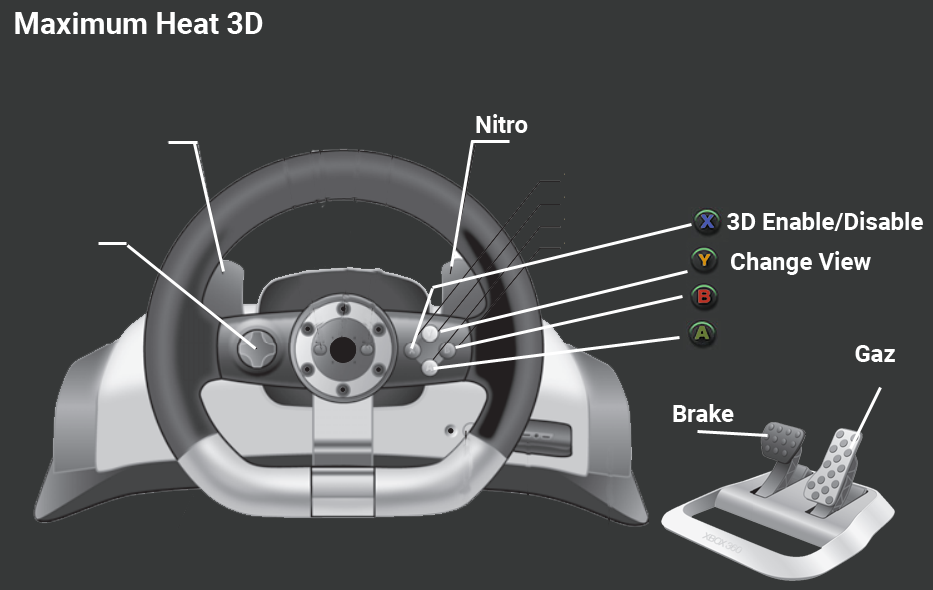
<style>
.page{position:relative;width:933px;height:590px;background:#363838}
.page>*{position:absolute;margin:0}
.t1{font:30px "Roboto-Bold";color:#ffffff}
.t2{font:24px "Roboto-Bold";color:#ffffff}
</style>
<div class="page">
<p class="t1" style="left:15px;top:12px;width:248px;height:22px">Maximum Heat 3D</p>
<p class="t2" style="left:476px;top:114px;width:52px;height:19px">Nitro</p>
<p class="t2" style="left:727px;top:211px;width:196px;height:20px">3D Enable/Disable</p>
<p class="t2" style="left:731px;top:251px;width:140px;height:24px">Change View</p>
<p class="t2" style="left:855px;top:345px;width:40px;height:17px">Gaz</p>
<p class="t2" style="left:673px;top:404px;width:61px;height:18px">Brake</p>
</div>
